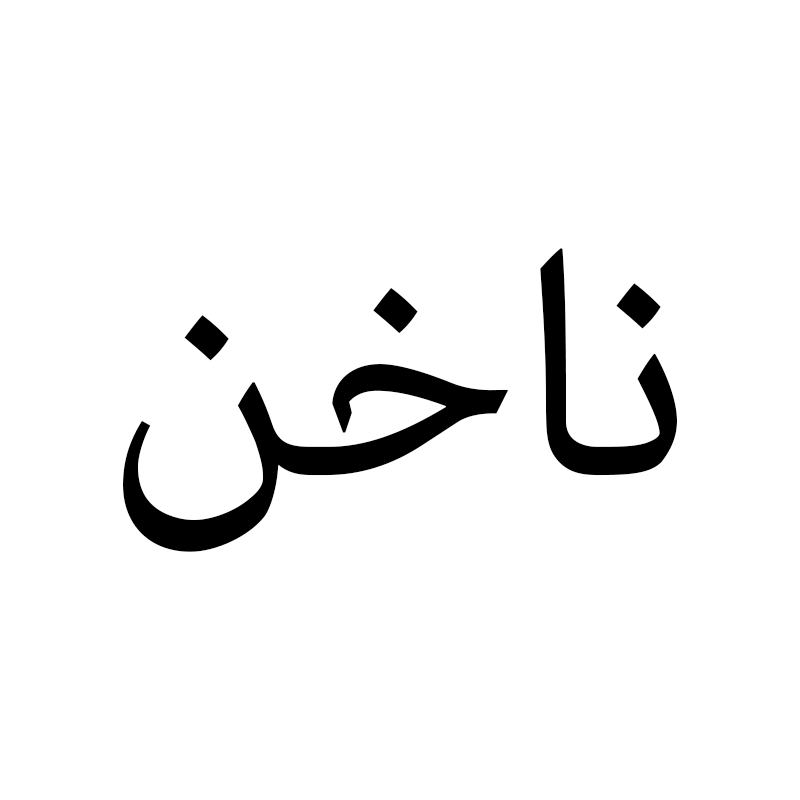
<style>
.page{position:relative;width:800px;height:800px;background:#ffffff}
.page>*{position:absolute;margin:0}
.t1{font:450px "AdobeArabic-Regular";color:#000000}
</style>
<div class="page">
<p class="t1" style="left:123px;top:248px;width:554px;height:304px">ناخن</p>
</div>
